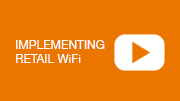
<style>
.page{position:relative;width:180px;height:101px;background:#ea7600}
.page>*{position:absolute;margin:0}
.t1{font:12px "HelveticaNeue";color:#ffffff}
</style>
<div class="page">
<p class="t1" style="left:16px;top:40px;width:89px;height:23px">IMPLEMENTING RETAIL WiFi</p>
</div>
